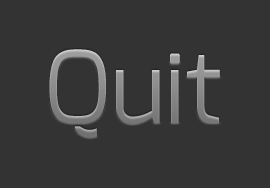
<style>
.page{position:relative;width:270px;height:188px;background:#333333}
.page>*{position:absolute;margin:0}
.t1{font:100px "Exo-Regular";color:#8e8e8e}
</style>
<div class="page">
<p class="t1" style="left:49px;top:49px;width:171px;height:89px">Quit</p>
</div>
